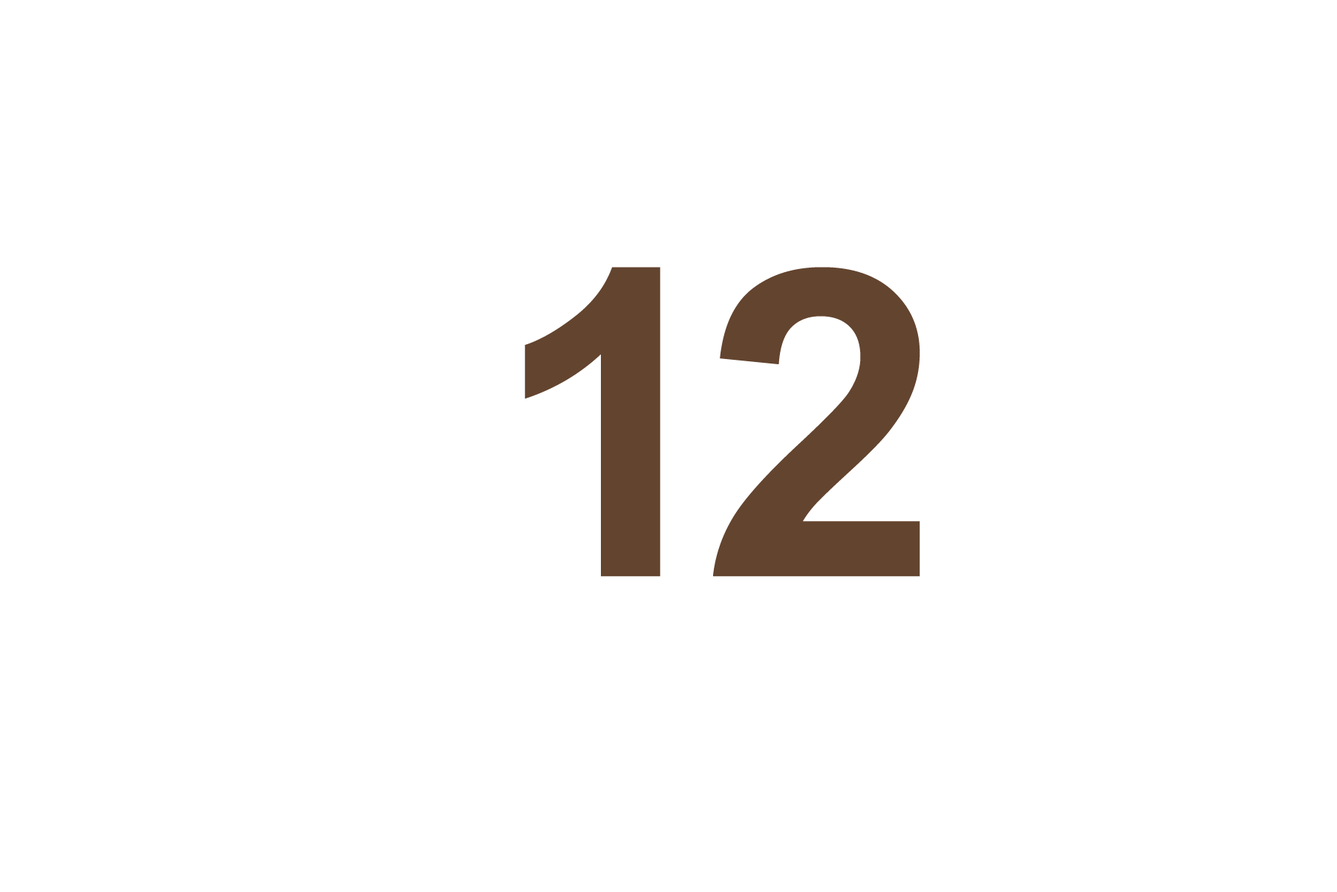
<style>
.page{position:relative;width:1337px;height:892px;background:#ffffff}
.page>*{position:absolute;margin:0}
.t1{font:429.6px "Arial-BoldMT";color:#63442f}
</style>
<div class="page">
<p class="t1" style="left:525px;top:267px;width:396px;height:310px">12</p>
</div>
